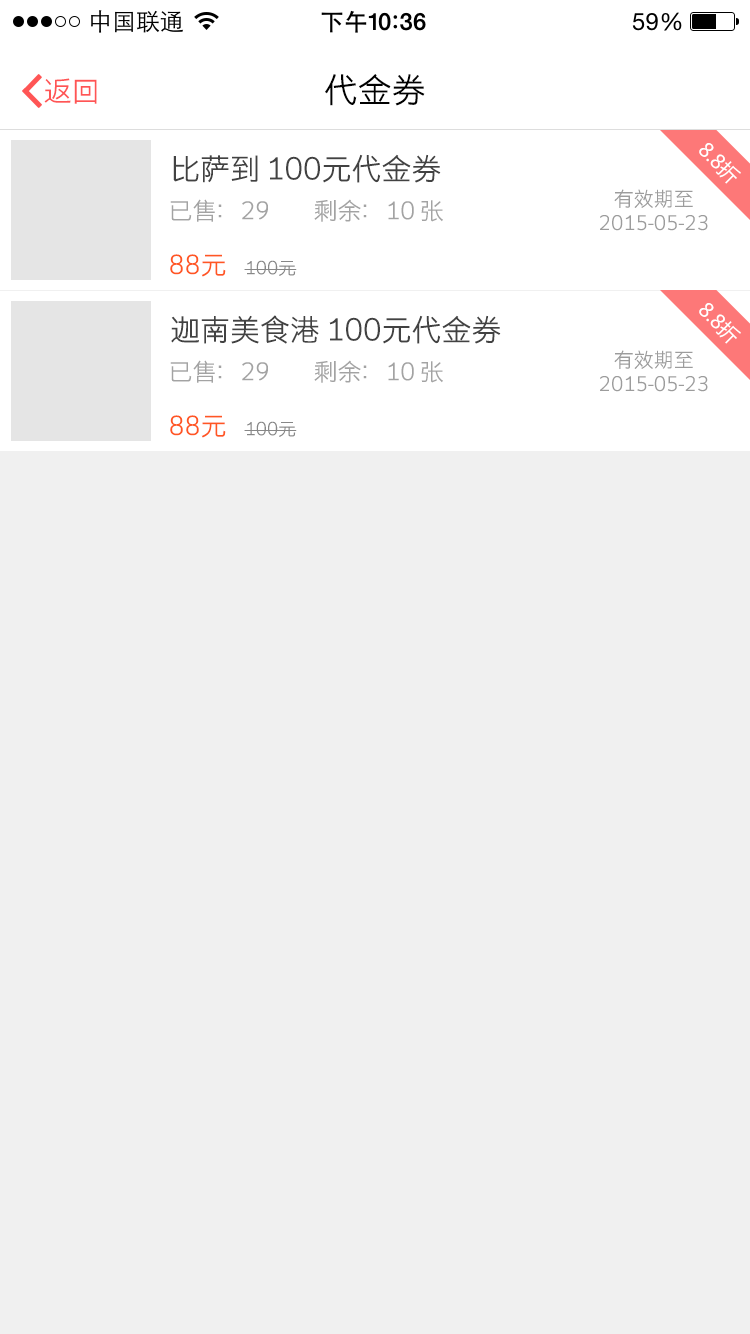
<style>
.page{position:relative;width:750px;height:1334px;background:#f0f0f0}
.page>*{position:absolute;margin:0}
.t1{font:28px "STHeitiSC-Light";color:#ff5555}
.t2{font:34px "STHeitiSC-Light";color:#000000}
.t3{font:19.6px "MicrosoftYaHei";color:#ffffff}
.t4{font:30px "STHeitiSC-Light";color:#424242}
.t5{font:20px/24px "STHeitiSC-Light";color:#9c9c9c}
.t6{font:24px "STHeitiSC-Light";color:#a3a3a3}
.t7{font:26px "STHeitiSC-Light";color:#ff5723}
.t8{font:18px "STHeitiSC-Light";color:#878787}
</style>
<div class="page">
<p class="t1" style="left:44px;top:78px;width:53px;height:26px">返回</p>
<p class="t2" style="left:325px;top:74px;width:100px;height:32px">代金券</p>
<p class="t3" style="left:699px;top:143px;width:42px;height:41px;rotate:45deg">8.8折</p>
<p class="t4" style="left:173px;top:154px;width:268px;height:29px">比萨到 100元代金券</p>
<p class="t5" style="left:600px;top:189px;width:108px;height:42px;text-align:center">有效期至<br>2015-05-23</p>
<p class="t6" style="left:170px;top:199px;width:273px;height:23px">已售：29         剩余：10 张</p>
<p class="t7" style="left:170px;top:254px;width:56px;height:23px">88元</p>
<p class="t8" style="left:244px;top:260px;width:53px;height:16px">100元</p>
<p class="t3" style="left:699px;top:303px;width:42px;height:41px;rotate:45deg">8.8折</p>
<p class="t4" style="left:171px;top:315px;width:330px;height:29px">迦南美食港 100元代金券</p>
<p class="t5" style="left:600px;top:350px;width:108px;height:42px;text-align:center">有效期至<br>2015-05-23</p>
<p class="t6" style="left:170px;top:360px;width:273px;height:23px">已售：29         剩余：10 张</p>
<p class="t7" style="left:170px;top:415px;width:56px;height:23px">88元</p>
<p class="t8" style="left:244px;top:421px;width:53px;height:16px">100元</p>
</div>
